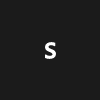
<style>
.page{position:relative;width:100px;height:100px;background:#1b1b1b}
.page>*{position:absolute;margin:0}
.t1{font:30px "SegoeUI";color:#ffffff;font-weight:bold}
</style>
<div class="page">
<p class="t1" style="left:45px;top:42px;width:11px;height:17px">s</p>
</div>
